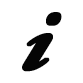
<style>
.page{position:relative;width:83px;height:83px;background:#ffffff}
.page>*{position:absolute;margin:0}
.t1{font:90px "AGaramondPro-BoldItalic";color:#050505;font-weight:bold;font-style:italic}
</style>
<div class="page">
<p class="t1" style="left:22px;top:12px;width:40px;height:60px">i</p>
</div>
